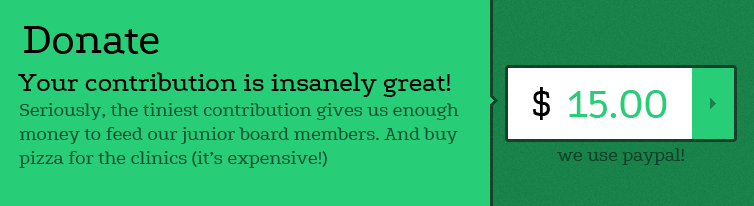
<style>
.page{position:relative;width:754px;height:206px;background:#28ce77}
.page>*{position:absolute;margin:0}
.t1{font:45px "Podkova";letter-spacing:-0.02em;color:#000000}
.t2{font:28px "Podkova";letter-spacing:-0.02em;color:#000000}
.t3{font:44px "Podkova";letter-spacing:-0.02em;color:#000000}
.t4{font:44px "Podkova";letter-spacing:-0.02em;color:#28ce77}
.t5{font:20px "Podkova";letter-spacing:-0.02em;color:#105230}
.t6{font:20px "Podkova";letter-spacing:-0.02em;color:#0c4125}
</style>
<div class="page">
<p class="t1" style="left:24px;top:26px;width:135px;height:28px">Donate</p>
<p class="t2" style="left:18px;top:72px;width:433px;height:25px">Your contribution is insanely great!</p>
<p class="t3" style="left:532px;top:87px;width:18px;height:33px">$</p>
<p class="t4" style="left:568px;top:90px;width:99px;height:28px">15.00</p>
<p class="t5" style="left:19px;top:103px;width:440px;height:65px">Seriously, the tiniest contribution gives us enough money to feed our junior board members. And buy pizza for the clinics (it’s expensive!)</p>
<p class="t6" style="left:557px;top:148px;width:127px;height:17px">we use paypal!</p>
</div>
